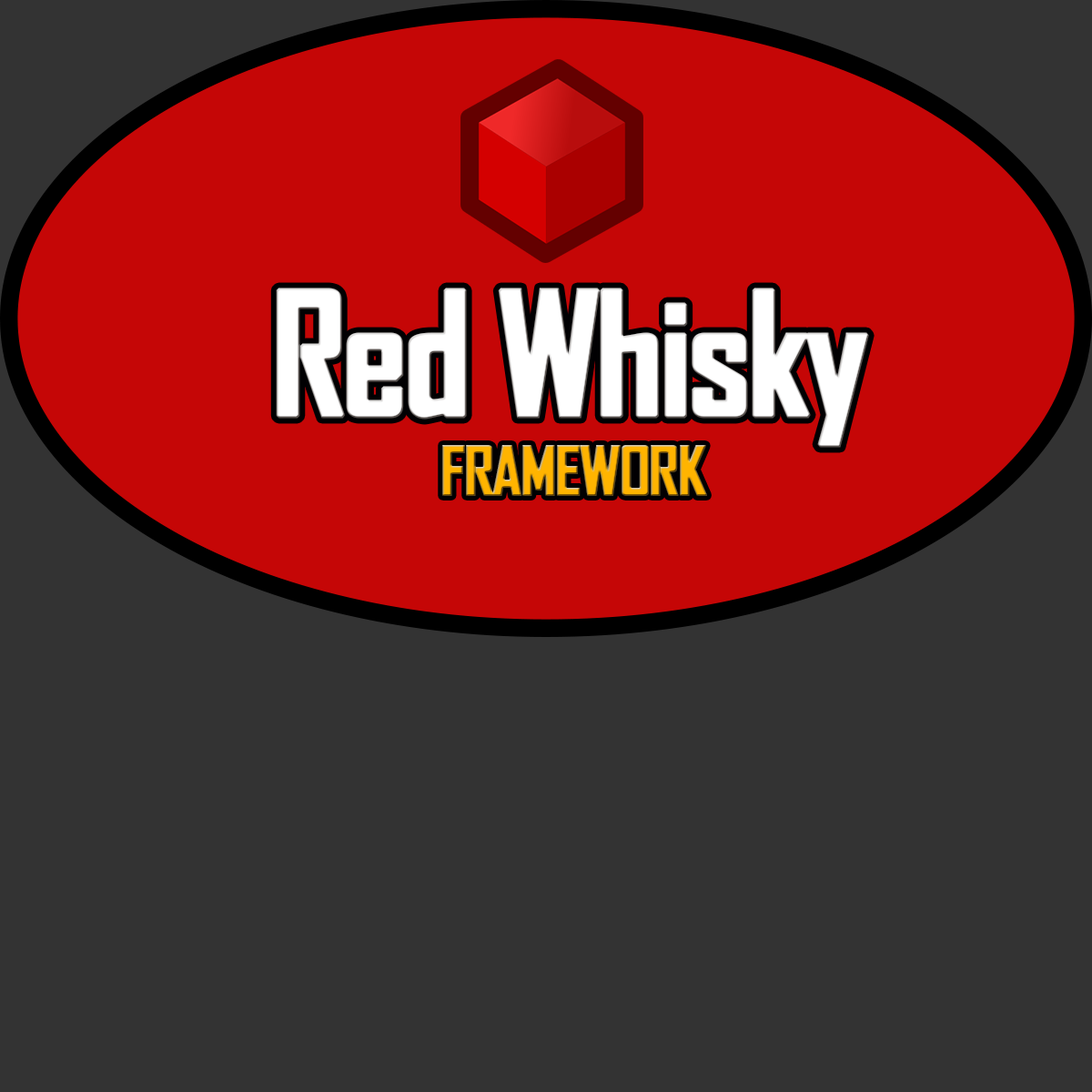
<style>
.page{position:relative;width:1092px;height:1092px;background:#333333}
.page>*{position:absolute;margin:0}
.t1{font:163.8px "AgencyFB-Bold";letter-spacing:-0.05em;color:#ffffff;font-weight:bold}
.t2{font:65.5px "AgencyFB-Bold";letter-spacing:-0.05em;color:#ffb400;font-weight:bold}
</style>
<div class="page">
<p class="t1" style="left:276px;top:288px;width:593px;height:160px">Red Whisky</p>
<p class="t2" style="left:442px;top:445px;width:265px;height:51px">FRAMEWORK</p>
</div>
